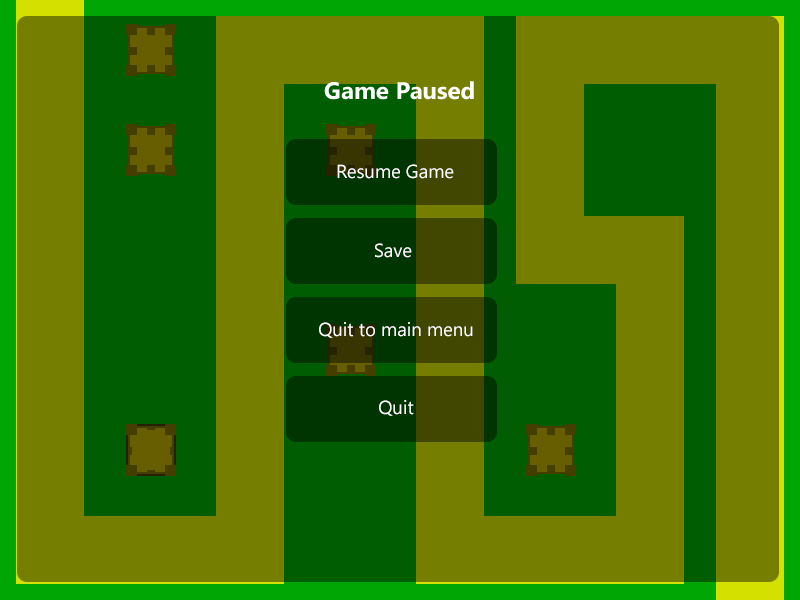
<style>
.page{position:relative;width:800px;height:600px;background:#767e00}
.page>*{position:absolute;margin:0}
.t1{font:18.7px "SegoeUI";color:#ffffff}
</style>
<div class="page">
<p class="t1" style="left:337px;top:164px;width:117px;height:15px">Resume Game</p>
<p class="t1" style="left:375px;top:243px;width:37px;height:15px">Save</p>
<p class="t1" style="left:319px;top:322px;width:154px;height:16px">Quit to main menu</p>
<p class="t1" style="left:379px;top:400px;width:35px;height:16px">Quit</p>
</div>
